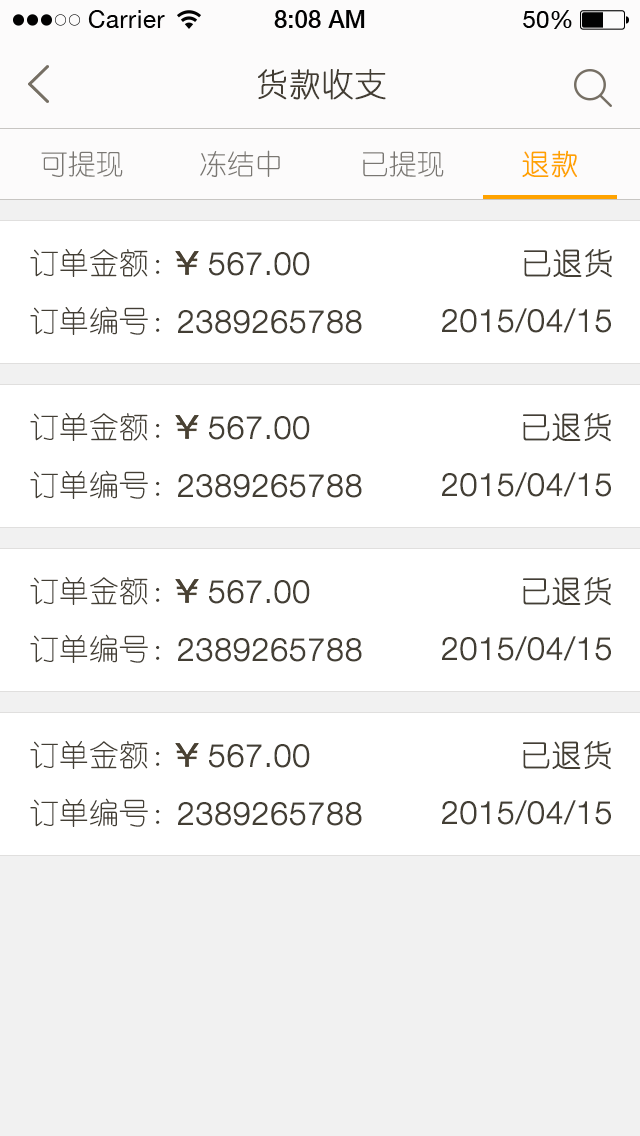
<style>
.page{position:relative;width:640px;height:1136px;background:#ffffff}
.page>*{position:absolute;margin:0}
.t1{font:32px "YouYuan";color:#433d33;text-transform:uppercase;font-weight:bold}
.t2{font:28px "YouYuan";color:#7a7772;text-transform:uppercase}
.t3{font:28px "YouYuan";color:#ffa300;text-transform:uppercase;font-weight:bold}
.t4{font:28px "YouYuan";color:#797672;text-transform:uppercase}
.t5{font:30px "YouYuan";color:#433e34;text-transform:uppercase}
.t6{font:32px "HelveticaNeueLTPro-Lt";color:#433e34;text-transform:uppercase;font-weight:bold}
.t7{font:30px "YouYuan";color:#433e34;text-transform:uppercase;font-weight:bold}
</style>
<div class="page">
<p class="t1" style="left:258px;top:69px;width:128px;height:31px">货款收支</p>
<p class="t2" style="left:200px;top:150px;width:80px;height:27px">冻结中</p>
<p class="t3" style="left:522px;top:150px;width:55px;height:28px">退款</p>
<p class="t4" style="left:41px;top:151px;width:82px;height:26px">可提现</p>
<p class="t4" style="left:363px;top:151px;width:81px;height:26px">已提现</p>
<p class="t5" style="left:30px;top:249px;width:130px;height:28px">订单金额：</p>
<p class="t6" style="left:209px;top:252px;width:101px;height:24px">567.00</p>
<p class="t7" style="left:524px;top:249px;width:88px;height:29px">已退货</p>
<p class="t5" style="left:30px;top:306px;width:130px;height:29px">订单编号：</p>
<p class="t6" style="left:178px;top:310px;width:184px;height:24px">2389265788</p>
<p class="t6" style="left:442px;top:308px;width:169px;height:25px">2015/04/15</p>
<p class="t5" style="left:30px;top:413px;width:130px;height:28px">订单金额：</p>
<p class="t7" style="left:523px;top:413px;width:88px;height:29px">已退货</p>
<p class="t6" style="left:209px;top:416px;width:101px;height:24px">567.00</p>
<p class="t5" style="left:30px;top:470px;width:130px;height:29px">订单编号：</p>
<p class="t6" style="left:442px;top:472px;width:169px;height:25px">2015/04/15</p>
<p class="t6" style="left:178px;top:474px;width:184px;height:24px">2389265788</p>
<p class="t5" style="left:30px;top:577px;width:130px;height:28px">订单金额：</p>
<p class="t6" style="left:209px;top:580px;width:101px;height:24px">567.00</p>
<p class="t7" style="left:523px;top:577px;width:88px;height:29px">已退货</p>
<p class="t5" style="left:30px;top:634px;width:130px;height:29px">订单编号：</p>
<p class="t6" style="left:178px;top:638px;width:184px;height:24px">2389265788</p>
<p class="t6" style="left:442px;top:636px;width:169px;height:25px">2015/04/15</p>
<p class="t5" style="left:30px;top:741px;width:130px;height:28px">订单金额：</p>
<p class="t6" style="left:209px;top:744px;width:101px;height:24px">567.00</p>
<p class="t7" style="left:523px;top:741px;width:88px;height:29px">已退货</p>
<p class="t5" style="left:30px;top:798px;width:130px;height:29px">订单编号：</p>
<p class="t6" style="left:178px;top:802px;width:184px;height:24px">2389265788</p>
<p class="t6" style="left:442px;top:800px;width:169px;height:25px">2015/04/15</p>
</div>
